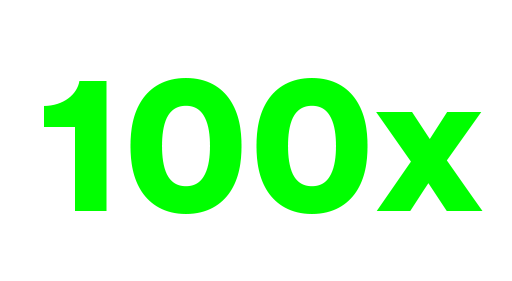
<style>
.page{position:relative;width:512px;height:281px;background:#ffffff}
.page>*{position:absolute;margin:0}
.t1{font:200px "CircularStd-Black";color:#00ff00}
</style>
<div class="page">
<p class="t1" style="left:44px;top:78px;width:439px;height:136px">100x</p>
</div>
